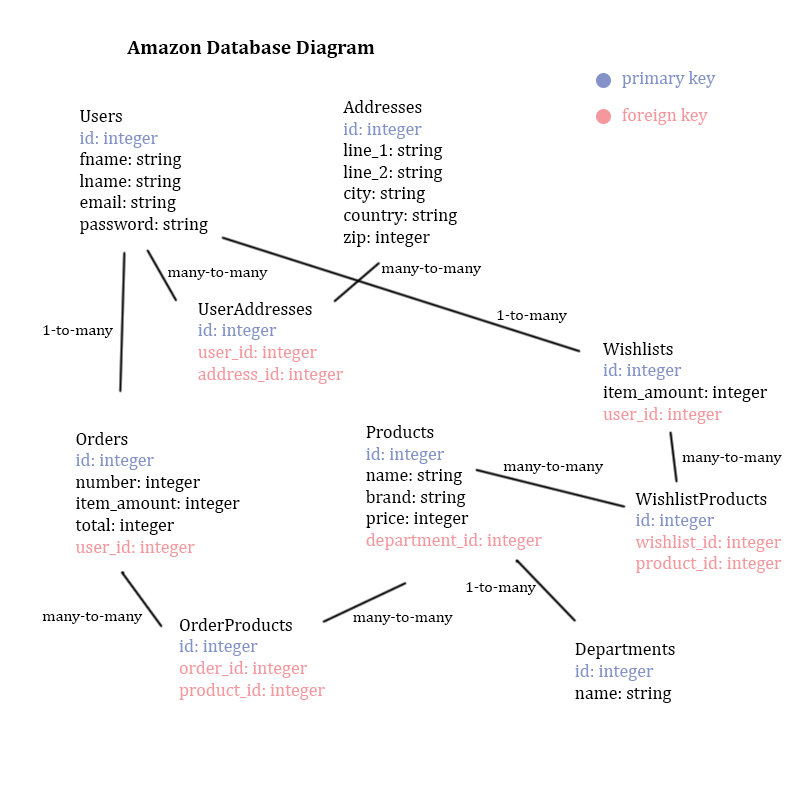
<style>
.page{position:relative;width:800px;height:800px;background:#ffffff}
.page>*{position:absolute;margin:0}
.t1{font:20px "Cambria-Bold";color:#000000}
.t2{font:18px "Cambria";color:#8393ca}
.t3{font:18px "Cambria";color:#000000}
.t4{font:18px "Cambria";color:#f5989d}
.t5{font:16px "Cambria";color:#000000}
</style>
<div class="page">
<p class="t1" style="left:127px;top:40px;width:248px;height:18px">Amazon Database Diagram</p>
<p class="t2" style="left:622px;top:71px;width:94px;height:17px">primary key</p>
<p class="t3" style="left:343px;top:100px;width:115px;height:147px">Addresses<br><span class="t2">id: integer<br></span>line_1: string<br>line_2: string<br>city: string<br>country: string<br>zip: integer</p>
<p class="t3" style="left:79px;top:110px;width:129px;height:124px">Users<br><span class="t2">id: integer<br></span>fname: string<br>lname: string<br>email: string<br>password: string</p>
<p class="t4" style="left:622px;top:108px;width:86px;height:17px">foreign key</p>
<p class="t5" style="left:168px;top:268px;width:100px;height:12px">many-to-many</p>
<p class="t5" style="left:381px;top:264px;width:101px;height:12px">many-to-many</p>
<p class="t4" style="left:198px;top:302px;width:145px;height:82px"><span class="t3">UserAddresses<br></span><span class="t2">id: integer<br></span>user_id: integer<br>address_id: integer</p>
<p class="t5" style="left:497px;top:310px;width:70px;height:13px">1-to-many</p>
<p class="t5" style="left:43px;top:325px;width:70px;height:13px">1-to-many</p>
<p class="t3" style="left:603px;top:342px;width:164px;height:82px">Wishlists<br><span class="t2">id: integer<br></span>item_amount: integer<br><span class="t4">user_id: integer</span></p>
<p class="t3" style="left:366px;top:425px;width:176px;height:125px">Products<br><span class="t2">id: integer<br></span>name: string<br>brand: string<br>price: integer<br><span class="t4">department_id: integer</span></p>
<p class="t3" style="left:75px;top:432px;width:165px;height:125px">Orders<br><span class="t2">id: integer<br></span>number: integer<br>item_amount: integer<br>total: integer<br><span class="t4">user_id: integer</span></p>
<p class="t5" style="left:503px;top:462px;width:101px;height:12px">many-to-many</p>
<p class="t5" style="left:682px;top:453px;width:100px;height:12px">many-to-many</p>
<p class="t4" style="left:635px;top:492px;width:147px;height:81px"><span class="t3">WishlistProducts<br></span><span class="t2">id: integer<br></span>wishlist_id: integer<br>product_id: integer</p>
<p class="t5" style="left:466px;top:582px;width:70px;height:13px">1-to-many</p>
<p class="t5" style="left:42px;top:612px;width:101px;height:12px">many-to-many</p>
<p class="t5" style="left:353px;top:613px;width:100px;height:12px">many-to-many</p>
<p class="t4" style="left:179px;top:618px;width:146px;height:82px"><span class="t3">OrderProducts<br></span><span class="t2">id: integer<br></span>order_id: integer<br>product_id: integer</p>
<p class="t3" style="left:575px;top:643px;width:100px;height:60px">Departments<br><span class="t2">id: integer<br></span>name: string</p>
</div>
